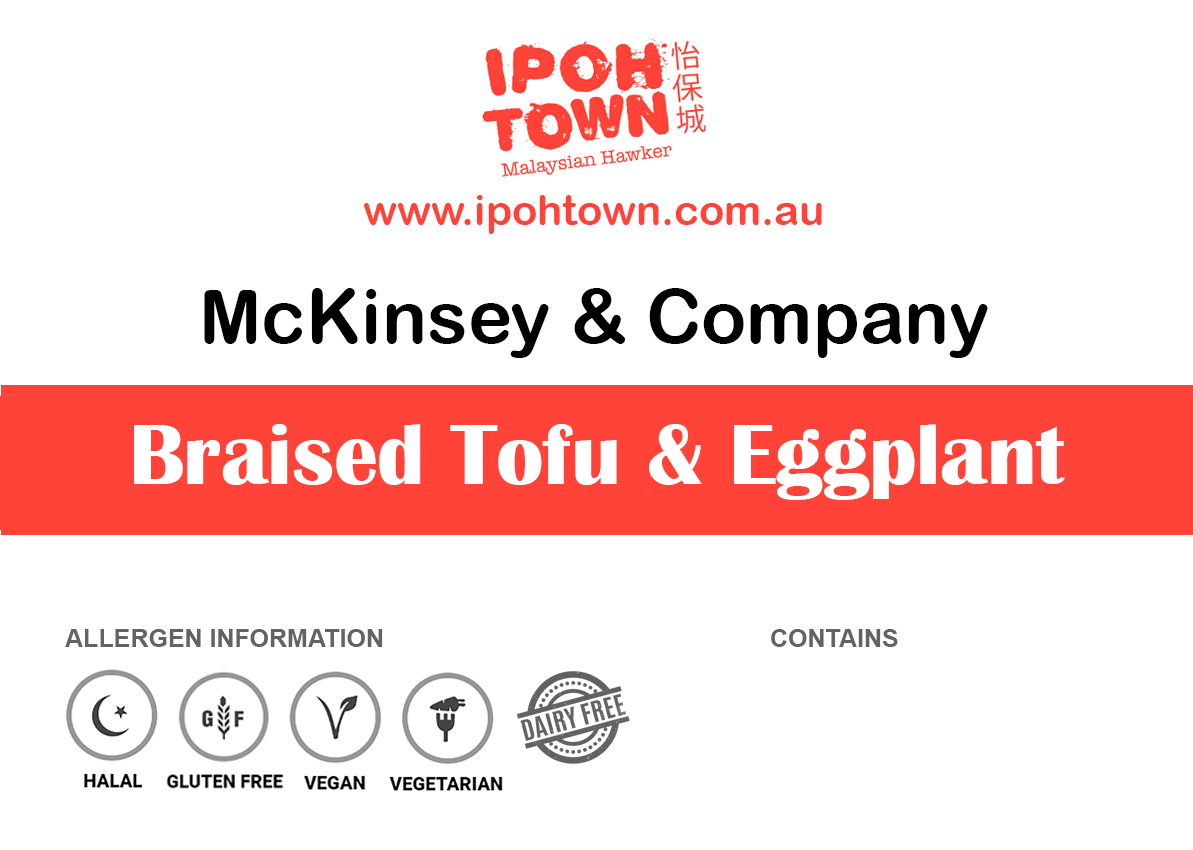
<style>
.page{position:relative;width:1193px;height:850px;background:#ffffff}
.page>*{position:absolute;margin:0}
.t1{font:41.7px "ArialRoundedMTBold";color:#ff4338}
.t2{font:75px "ArialRoundedMTBold";color:#000000}
.t3{font:87.5px "BritannicBold";color:#ffffff}
.t4{font:25px "Arial-BoldMT";color:#636363}
</style>
<div class="page">
<p class="t1" style="left:364px;top:195px;width:458px;height:39px">www.ipohtown.com.au</p>
<p class="t2" style="left:204px;top:288px;width:784px;height:70px">McKinsey &amp; Company</p>
<p class="t3" style="left:134px;top:424px;width:931px;height:76px">Braised Tofu &amp; Eggplant</p>
<p class="t4" style="left:65px;top:629px;width:318px;height:18px">ALLERGEN INFORMATION</p>
<p class="t4" style="left:771px;top:629px;width:127px;height:18px">CONTAINS</p>
</div>
